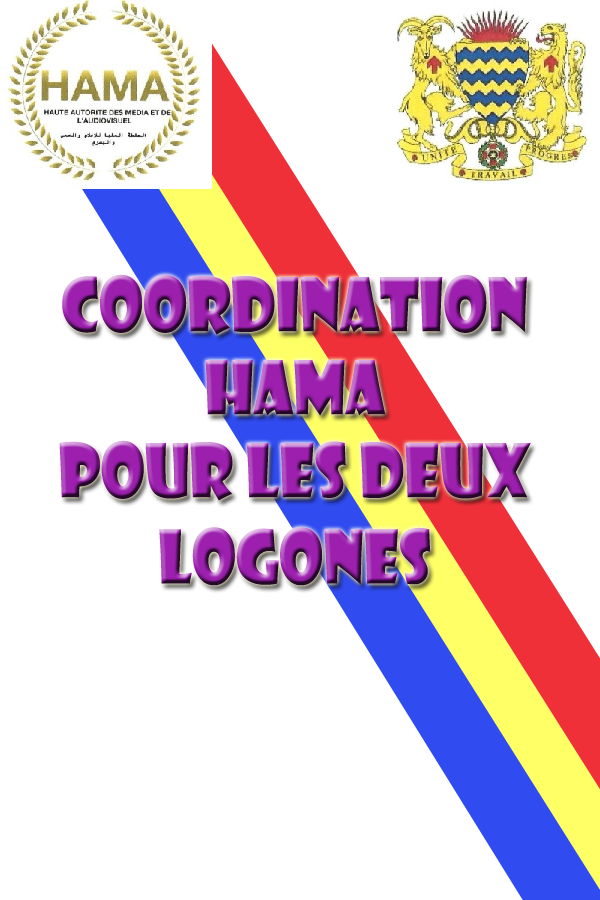
<style>
.page{position:relative;width:600px;height:900px;background:#ffffff}
.page>*{position:absolute;margin:0}
.t1{font:72px "ShowcardGothic-Reg";scale:0.88 1}
</style>
<div class="page">
<p class="t1" style="left:62px;top:274px;width:465px;height:61px">COORDINATION</p>
<p class="t1" style="left:205px;top:360px;width:181px;height:56px">HAMA</p>
<p class="t1" style="left:59px;top:440px;width:472px;height:146px;text-align:center">POUR LES DEUX LOGONES</p>
</div>
